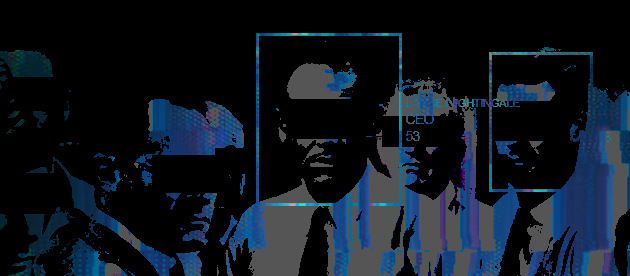
<style>
.page{position:relative;width:630px;height:276px;background:#000000}
.page>*{position:absolute;margin:0}
.t1{font:14px "ArialMT";letter-spacing:-0.05em;font-variant:small-caps}
</style>
<div class="page">
<p class="t1" style="left:406px;top:97px;width:114px;height:44px">Lance Nightingale<br>CEO<br>53</p>
</div>
